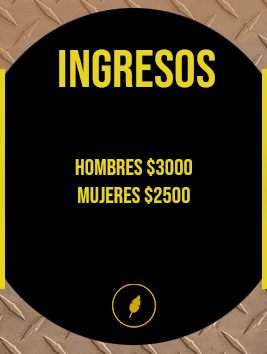
<style>
.page{position:relative;width:267px;height:354px;background:#000000}
.page>*{position:absolute;margin:0}
.t1{font:54.2px "BebasNeue-Regular";color:#e8d41f}
.t2{font:23.2px "BebasNeue-Regular";color:#e8d41f}
</style>
<div class="page">
<p class="t1" style="left:59px;top:49px;width:156px;height:39px">INGRESOS</p>
<p class="t2" style="left:75px;top:158px;width:117px;height:46px;text-align:center">HOMBRES $3000<br>MUJERES $2500</p>
</div>
